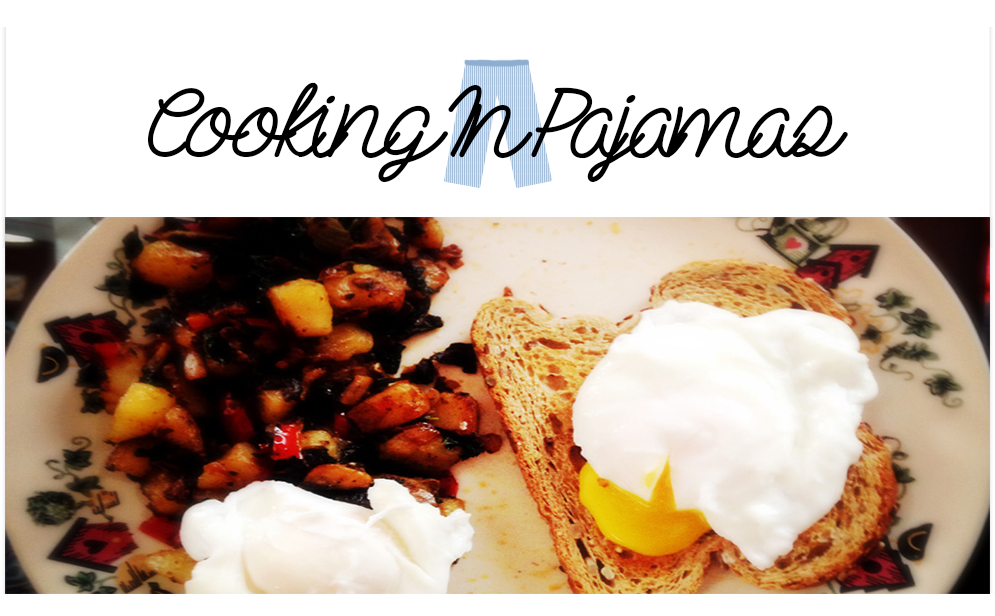
<style>
.page{position:relative;width:995px;height:616px;background:#ffffff}
.page>*{position:absolute;margin:0}
.t1{font:100px "Endofthedream";letter-spacing:-0.08em;color:#000000}
</style>
<div class="page">
<p class="t1" style="left:148px;top:82px;width:700px;height:100px">Cooking In Pajamas</p>
</div>
